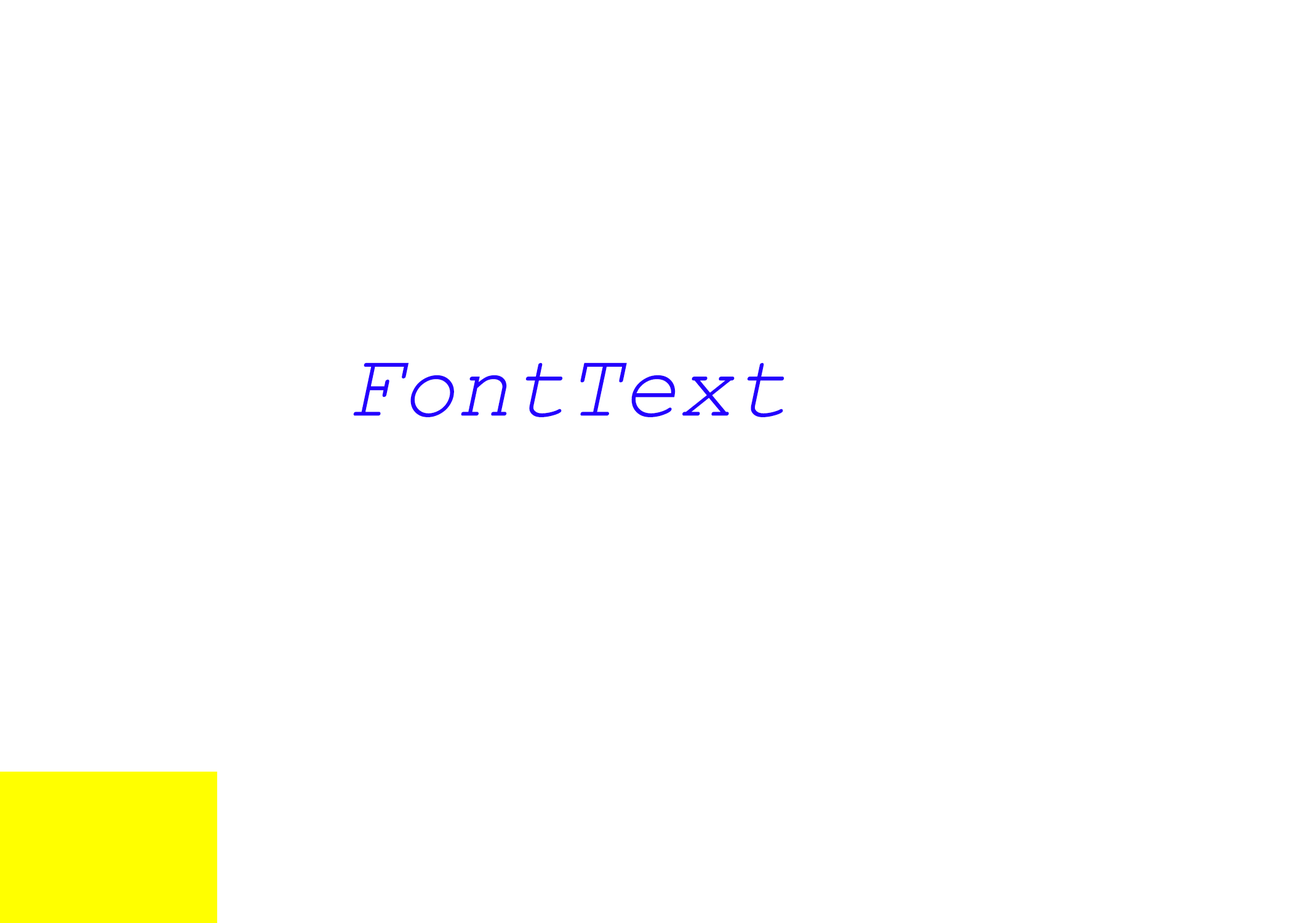
<style>
.page{position:relative;width:1292px;height:923px;background:#ffffff}
.page>*{position:absolute;margin:0}
.t1{font:92.3px "CourierNewPS-ItalicMT";color:#2400fe}
</style>
<div class="page">
<p class="t1" style="left:353px;top:362px;width:431px;height:55px">FontText</p>
</div>
